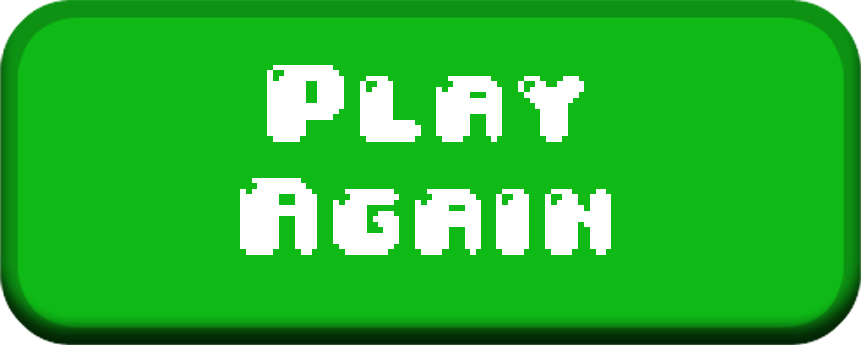
<style>
.page{position:relative;width:861px;height:345px;background:#0fba17}
.page>*{position:absolute;margin:0}
.t1{font:93.6px "04b30";letter-spacing:0.05em;color:#fefefe}
</style>
<div class="page">
<p class="t1" style="left:240px;top:65px;width:371px;height:190px;text-align:center">Play<br>Again</p>
</div>
